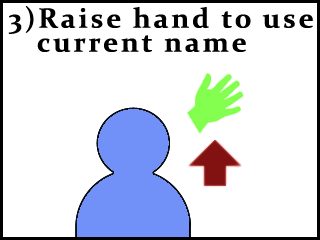
<style>
.page{position:relative;width:320px;height:240px;background:#ffffff}
.page>*{position:absolute;margin:0}
.t1{font:28px/24px "Constantia-Bold";letter-spacing:0.1em;color:#000000}
.t2{font:28px/18px "Constantia-Bold";letter-spacing:0.1em;color:#000000}
</style>
<div class="page">
<p class="t1" style="left:8px;top:6px;width:305px;height:46px"><span class="t2">3)</span>Raise hand to use  <br>   current name</p>
</div>
